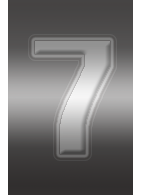
<style>
.page{position:relative;width:142px;height:195px}
.page>*{position:absolute;margin:0}
.t1{font:150px "Krungthep"}
</style>
<div class="page">
<p class="t1" style="left:35px;top:41px;width:75px;height:113px">7</p>
</div>
